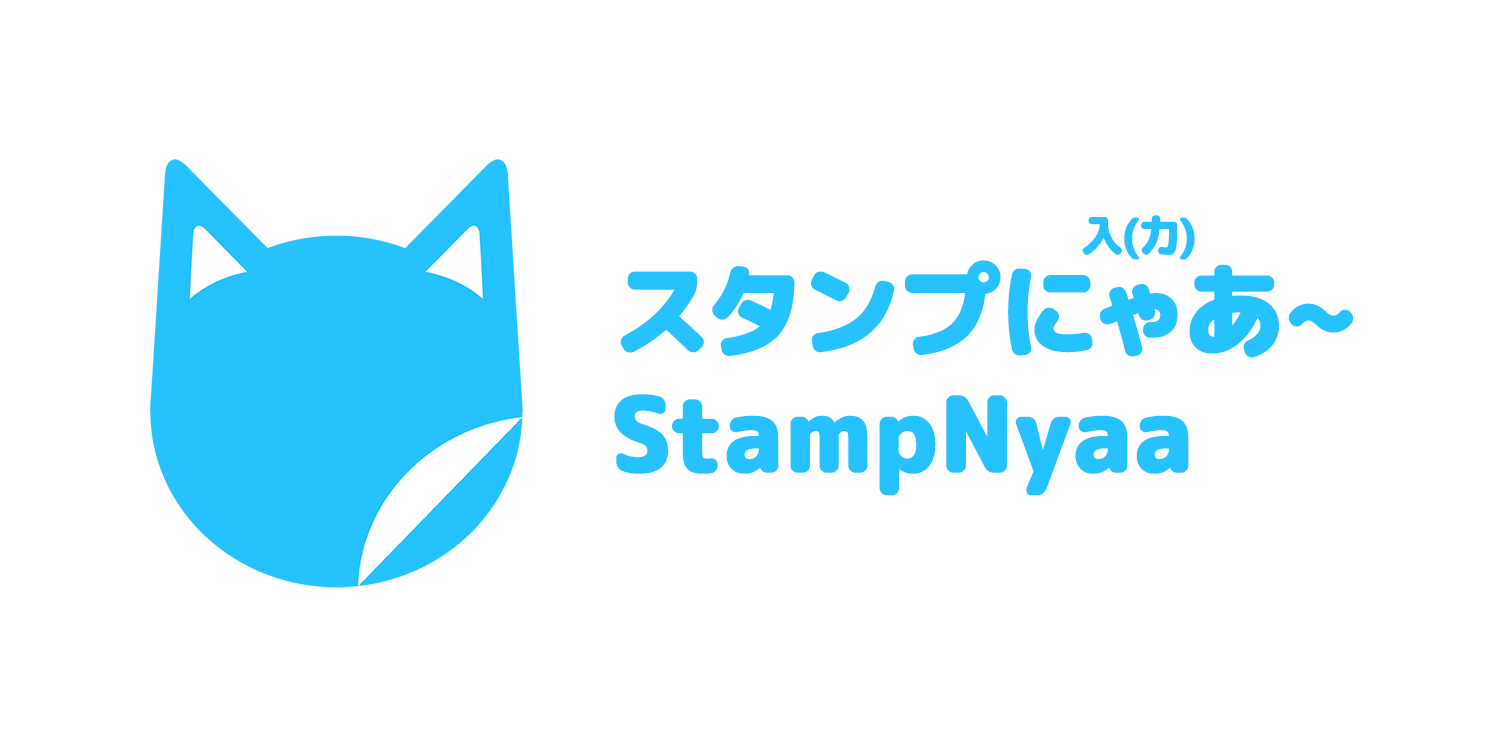
<style>
.page{position:relative;width:1500px;height:750px;background:#ffffff}
.page>*{position:absolute;margin:0}
.t1{font:42.6px "RoundedMplus1c-ExtraBold";color:#26c2ff;font-weight:bold}
.t2{font:102.2px "RoundedMplus1c-ExtraBold";letter-spacing:0.02em;color:#26c2ff;font-weight:bold}
</style>
<div class="page">
<p class="t1" style="left:1082px;top:215px;width:113px;height:45px">入(力)</p>
<p class="t2" style="left:614px;top:260px;width:740px;height:236px">スタンプにゃあ~<br>StampNyaa</p>
</div>
